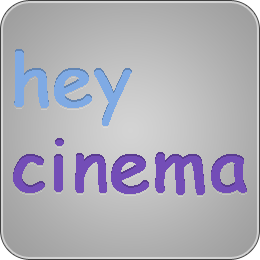
<style>
.page{position:relative;width:260px;height:260px}
.page>*{position:absolute;margin:0}
.t1{font:72px "ComicSansMS";color:#734db7;font-weight:bold}
.t2{font:72px "ComicSansMS";color:#7faae4;font-weight:bold}
</style>
<div class="page">
<p class="t1" style="left:13px;top:49px;width:234px;height:146px"><span class="t2">hey<br></span>cinema</p>
</div>
